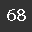
<style>
.page{position:relative;width:32px;height:32px;background:#333333}
.page>*{position:absolute;margin:0}
.t1{font:17.8px "MyriadPro-Regular";color:#ffffff;scale:1.12 1}
</style>
<div class="page">
<p class="t1" style="left:7px;top:9px;width:19px;height:12px">68=5</p>
</div>
